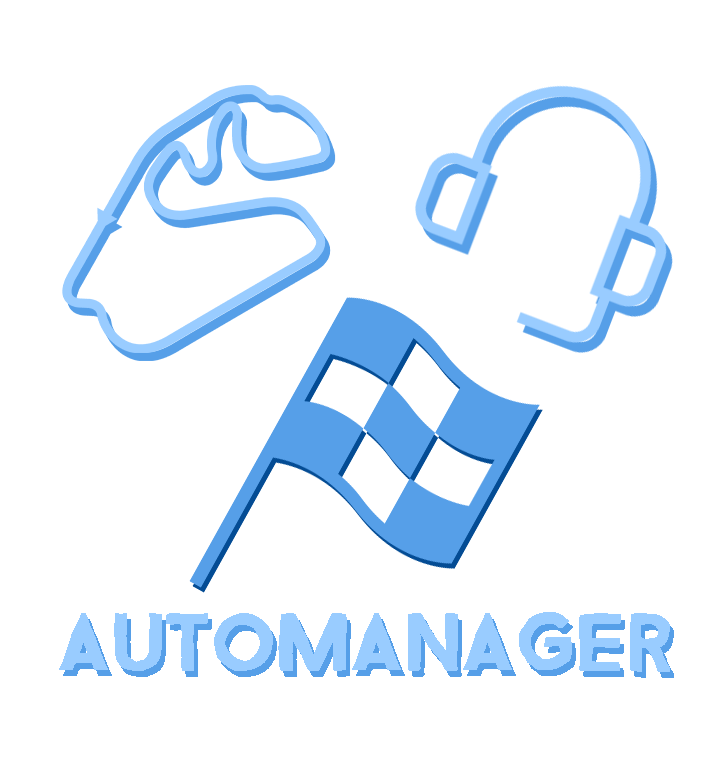
<style>
.page{position:relative;width:720px;height:762px;background:#ffffff}
.page>*{position:absolute;margin:0}
.t1{font:82.4px "Bizon";color:#99ccff;font-weight:bold}
</style>
<div class="page">
<p class="t1" style="left:59px;top:612px;width:611px;height:60px">AUTOMANAGER</p>
</div>
